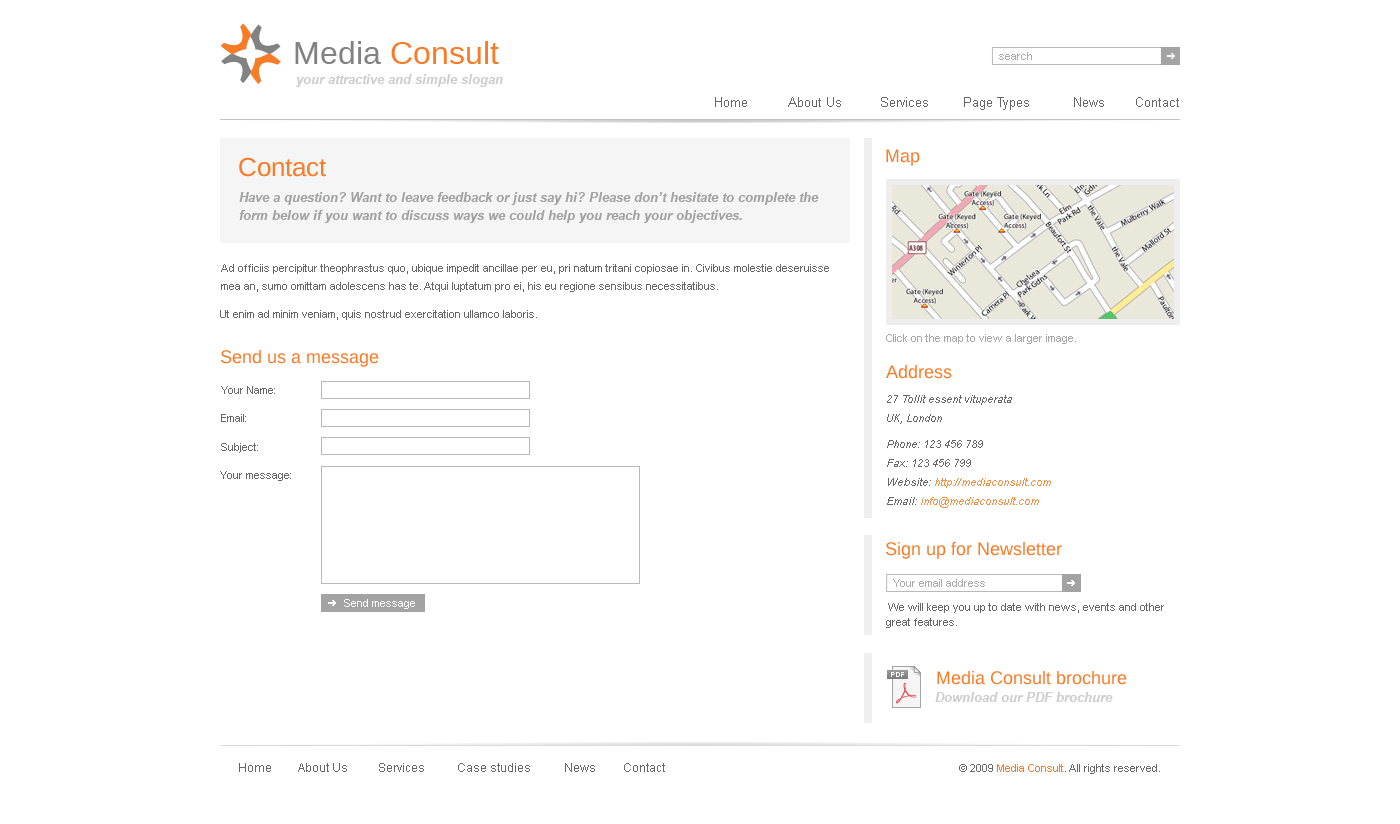
<style>
.page{position:relative;width:1400px;height:824px;background:#ffffff}
.page>*{position:absolute;margin:0}
.t1{font:32px "LiberationSans-Regular";color:#828282}
.t2{font:32px "LiberationSans-Regular";color:#f87b27}
.t3{font:11px "ArialMT";color:#aaaaaa}
.t4{font:13px "Arial-BoldItalicMT";color:#cacaca}
.t5{font:13px "ArialMT";color:#666666}
.t6{font:18px "LiberationSans-Regular";color:#f87b27}
.t7{font:26px "LiberationSans-Regular";color:#f87b27}
.t8{font:13px/18px "Arial-BoldItalicMT";color:#a1a1a1}
.t9{font:11px/18px "ArialMT";color:#666666}
.t10{font:11px "ArialMT";color:#666666}
.t11{font:11px "ArialMT";color:#a7a7a7}
.t12{font:11px/19px "Arial-ItalicMT";color:#666666}
.t13{font:11px/19px "Arial-ItalicMT"}
.t14{font:11px "Arial-ItalicMT";color:#f98d44}
.t15{font:11px "ArialMT";color:#ffffff}
.t16{font:11px/15px "ArialMT";color:#666666}
.t17{font:7px "LiberationSans-Regular";letter-spacing:0.06em;color:#ffffff}
.t18{font:7px "LiberationSans-Regular";color:#ffffff}
.t19{font:12px "ArialMT";color:#666666}
.t20{font:11px "ArialMT";color:#f87b27}
</style>
<div class="page">
<p class="t1" style="left:295px;top:41px;width:86px;height:23px">Media</p>
<p class="t2" style="left:391px;top:41px;width:108px;height:23px">Consult</p>
<p class="t3" style="left:999px;top:52px;width:33px;height:8px">search</p>
<p class="t4" style="left:296px;top:74px;width:207px;height:13px">your attractive and simple slogan</p>
<p class="t5" style="left:715px;top:97px;width:32px;height:10px">Home</p>
<p class="t5" style="left:788px;top:97px;width:53px;height:10px">About Us</p>
<p class="t5" style="left:881px;top:97px;width:47px;height:10px">Services</p>
<p class="t5" style="left:964px;top:97px;width:65px;height:13px">Page Types</p>
<p class="t5" style="left:1074px;top:97px;width:30px;height:10px">News</p>
<p class="t5" style="left:1136px;top:97px;width:43px;height:10px">Contact</p>
<p class="t6" style="left:886px;top:149px;width:34px;height:17px">Map</p>
<p class="t7" style="left:239px;top:157px;width:87px;height:20px">Contact</p>
<p class="t8" style="left:239px;top:192px;width:580px;height:31px">Have a question? Want to leave feedback or just say hi? Please don’t hesitate to complete the form below if you want to discuss ways we could help you reach your objectives.</p>
<p class="t9" style="left:221px;top:264px;width:608px;height:28px">Ad officiis percipitur theophrastus quo, ubique impedit ancillae per eu, pri natum tritani copiosae in. Civibus molestie deseruisse mea an, sumo omittam adolescens has te. Atqui luptatum pro ei, his eu regione sensibus necessitatibus.</p>
<p class="t10" style="left:220px;top:310px;width:317px;height:10px">Ut enim ad minim veniam, quis nostrud exercitation ullamco laboris.</p>
<p class="t11" style="left:886px;top:334px;width:190px;height:10px">Click on the map to view a larger image.</p>
<p class="t6" style="left:221px;top:350px;width:158px;height:17px">Send us a message</p>
<p class="t6" style="left:886px;top:365px;width:66px;height:14px">Address</p>
<p class="t10" style="left:221px;top:386px;width:54px;height:8px">Your Name:</p>
<p class="t12" style="left:887px;top:395px;width:125px;height:29px">27 Tollit essent vituperata<br>UK, London</p>
<p class="t10" style="left:221px;top:414px;width:25px;height:8px">Email:</p>
<p class="t10" style="left:221px;top:443px;width:37px;height:10px">Subject:</p>
<p class="t13" style="left:887px;top:440px;width:164px;height:68px">Phone: 123 456 789<br>Fax: 123 456 799<br>Website: http://mediaconsult.com<br>Email: info@mediaconsult.com</p>
<p class="t10" style="left:220px;top:471px;width:71px;height:10px">Your message:</p>
<p class="t14" style="left:935px;top:478px;width:116px;height:10px">http://mediaconsult.com</p>
<p class="t14" style="left:921px;top:497px;width:118px;height:11px">info@mediaconsult.com</p>
<p class="t6" style="left:886px;top:542px;width:176px;height:17px">Sign up for Newsletter</p>
<p class="t3" style="left:893px;top:579px;width:92px;height:8px">Your email address</p>
<p class="t15" style="left:344px;top:599px;width:71px;height:10px">Send message</p>
<p class="t16" style="left:886px;top:603px;width:278px;height:25px">We will keep you up to date with news, events and other great features.</p>
<p class="t17" style="left:891px;top:672px;width:13px;height:5px">PD<span class="t18">F</span></p>
<p class="t6" style="left:937px;top:671px;width:190px;height:14px">Media Consult brochure</p>
<p class="t4" style="left:935px;top:692px;width:178px;height:10px">Download our PDF brochure</p>
<p class="t19" style="left:239px;top:763px;width:32px;height:9px">Home</p>
<p class="t19" style="left:298px;top:763px;width:49px;height:9px">About Us</p>
<p class="t19" style="left:379px;top:763px;width:45px;height:9px">Services</p>
<p class="t19" style="left:458px;top:763px;width:72px;height:9px">Case studies</p>
<p class="t19" style="left:565px;top:763px;width:30px;height:9px">News</p>
<p class="t19" style="left:624px;top:763px;width:41px;height:9px">Contact</p>
<p class="t10" style="left:959px;top:764px;width:201px;height:10px">© 2009 Media Consult. All rights reserved.</p>
<p class="t20" style="left:997px;top:764px;width:66px;height:8px">Media Consult</p>
</div>
